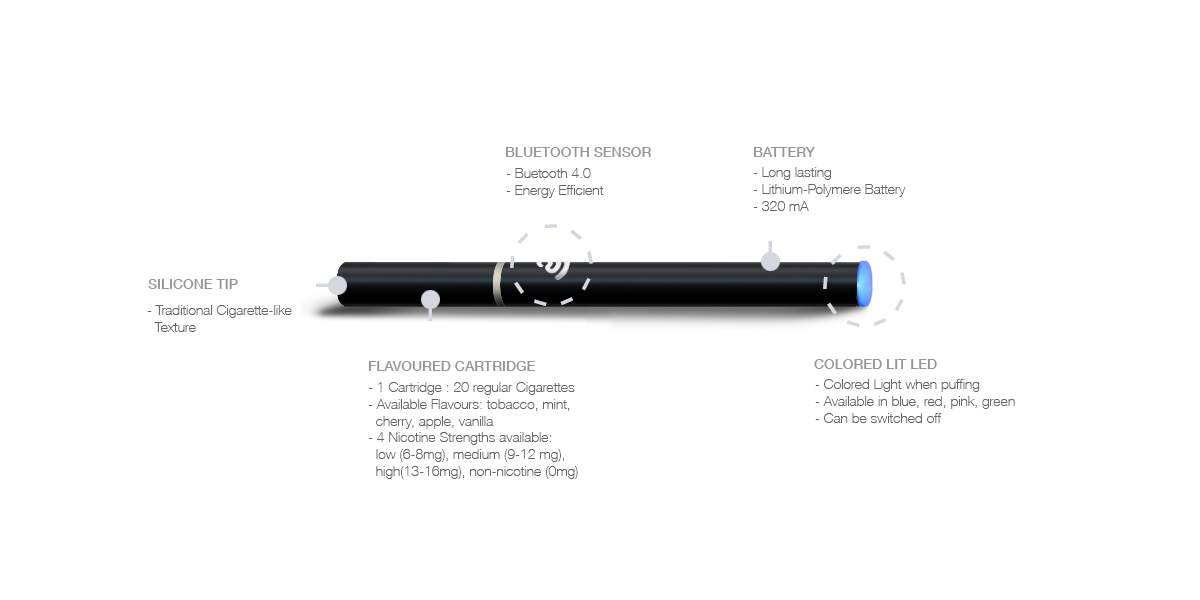
<style>
.page{position:relative;width:1200px;height:600px;background:#ffffff}
.page>*{position:absolute;margin:0}
.t1{font:14px "HelveticaNeue-Medium";color:#969696}
.t2{font:14px "HelveticaNeue-Thin";color:#646464}
</style>
<div class="page">
<p class="t1" style="left:505px;top:147px;width:146px;height:10px">BLUETOOTH SENSOR</p>
<p class="t1" style="left:753px;top:147px;width:62px;height:10px">BATTERY</p>
<p class="t2" style="left:506px;top:168px;width:98px;height:30px">- Buetooth 4.0<br>- Energy Efficient</p>
<p class="t2" style="left:753px;top:167px;width:153px;height:44px">- Long lasting<br>- Lithium-Polymere Battery<br>- 320 mA</p>
<p class="t1" style="left:148px;top:279px;width:90px;height:10px">SILICONE TIP</p>
<p class="t2" style="left:147px;top:305px;width:145px;height:27px">- Traditional Cigarette-like<br>  Texture</p>
<p class="t1" style="left:368px;top:361px;width:167px;height:10px">FLAVOURED CARTRIDGE</p>
<p class="t1" style="left:814px;top:359px;width:123px;height:10px">COLORED LIT LED</p>
<p class="t2" style="left:368px;top:382px;width:210px;height:97px">- 1 Cartridge : 20 regular Cigarettes<br>- Available Flavours: tobacco, mint,<br>  cherry, apple, vanilla<br>- 4 Nicotine Strengths available:<br>  low (6-8mg), medium (9-12 mg), <br>  high(13-16mg), non-nicotine (0mg)</p>
<p class="t2" style="left:815px;top:379px;width:200px;height:44px">- Colored Light when puffing<br>- Available in blue, red, pink, green<br>- Can be switched off</p>
</div>
